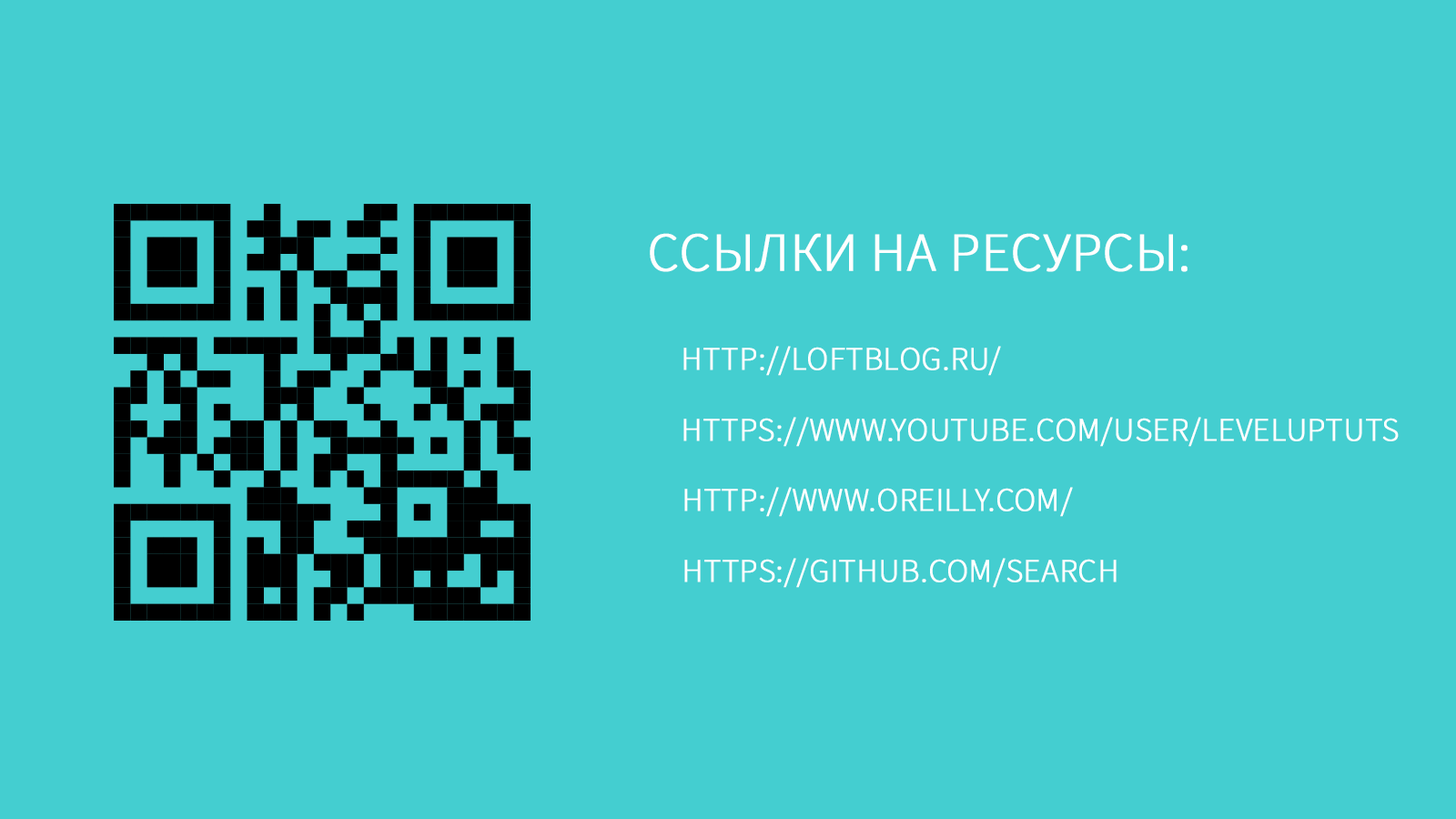
<style>
.page{position:relative;width:1456px;height:819px;background:#44ced0}
.page>*{position:absolute;margin:0}
.t1{font:54.6px "SourceSansPro-Light";color:#ffffff;text-transform:uppercase;font-weight:bold}
.t2{font:32.8px "SourceSansPro-Light";color:#ffffff;text-transform:uppercase;font-weight:bold}
</style>
<div class="page">
<p class="t1" style="left:650px;top:233px;width:538px;height:39px">ссылки на ресурсы:</p>
<p class="t2" style="left:683px;top:346px;width:318px;height:30px">http://loftblog.ru/</p>
<p class="t2" style="left:683px;top:417px;width:716px;height:30px">https://www.youtube.com/user/LevelUpTuts</p>
<p class="t2" style="left:684px;top:487px;width:389px;height:30px">http://www.oreilly.com/</p>
<p class="t2" style="left:684px;top:558px;width:433px;height:30px">https://github.com/search</p>
</div>
